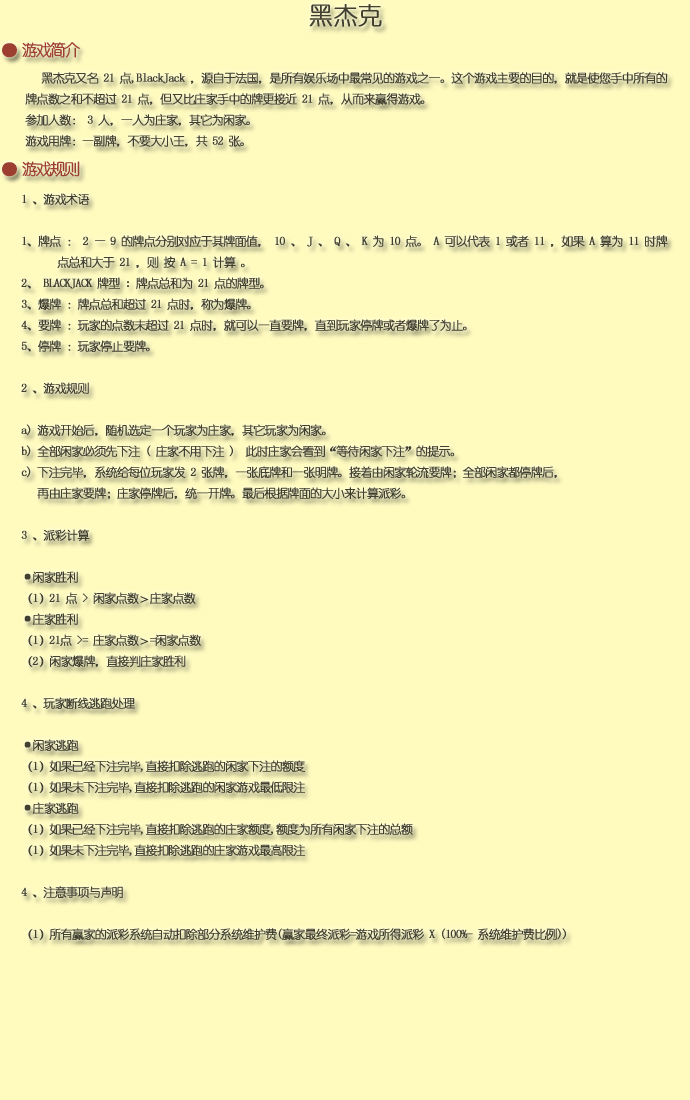
<style>
.page{position:relative;width:690px;height:1100px;background:#fffbbf}
.page>*{position:absolute;margin:0}
.t1{font:24px "YouYuan";color:#403f30;font-weight:bold}
.t2{font:16px "YouYuan";letter-spacing:-0.14em;color:#9c3f30;font-weight:bold}
.t3{font:12px "YouYuan";letter-spacing:-0.08em;color:#403f30;font-weight:bold}
</style>
<div class="page">
<p class="t1" style="left:309px;top:4px;width:73px;height:23px">黑杰克</p>
<p class="t2" style="left:2px;top:42px;width:78px;height:16px">● 游戏简介</p>
<p class="t3" style="left:25px;top:72px;width:643px;height:75px">黑杰克又名 21 点,BlackJack ，源自于法国，是所有娱乐场中最常见的游戏之一。这个游戏主要的目的，就是使您手中所有的<br>牌点数之和不超过 21 点，但又比庄家手中的牌更接近 21 点，从而来赢得游戏。<br>参加人数： 3 人，一人为庄家，其它为闲家。<br>游戏用牌：一副牌，不要大小王，共 52 张。</p>
<p class="t2" style="left:2px;top:161px;width:78px;height:16px">● 游戏规则</p>
<p class="t3" style="left:21px;top:193px;width:647px;height:747px">1 、游戏术语<br><br>1、牌点 ： 2 — 9 的牌点分别对应于其牌面值， 10 、 J 、 Q 、 K 为 10 点。 A 可以代表 1 或者 11 ，如果 A 算为 11 时牌<br> 点总和大于 21 ，则 按 A = 1 计算 。<br>2、 BLACKJACK 牌型 : 牌点总和为 21 点的牌型。<br>3、爆牌 ：牌点总和超过 21 点时，称为爆牌。<br>4、要牌 ：玩家的点数未超过 21 点时，就可以一直要牌，直到玩家停牌或者爆牌了为止。<br>5、停牌 ：玩家停止要牌。<br> <br>2 、游戏规则 <br><br>a) 游戏开始后，随机选定一个玩家为庄家，其它玩家为闲家。<br>b) 全部闲家必须先下注 ( 庄家不用下注 )  此时庄家会看到“等待闲家下注”的提示。<br>c) 下注完毕，系统给每位玩家发 2 张牌，一张底牌和一张明牌。接着由闲家轮流要牌；全部闲家都停牌后，<br>   再由庄家要牌；庄家停牌后，统一开牌。最后根据牌面的大小来计算派彩。 <br><br>3 、派彩计算 <br><br>·闲家胜利<br>（1）21 点 &gt; 闲家点数＞庄家点数<br>·庄家胜利 <br>（1）21点 &gt;= 庄家点数＞=闲家点数 <br>（2）闲家爆牌，直接判庄家胜利<br><br>4 、玩家断线逃跑处理<br><br>·闲家逃跑<br>（1）如果已经下注完毕,直接扣除逃跑的闲家下注的额度<br>（1）如果未下注完毕,直接扣除逃跑的闲家游戏最低限注<br>·庄家逃跑<br>（1）如果已经下注完毕,直接扣除逃跑的庄家额度,额度为所有闲家下注的总额<br>（1）如果未下注完毕,直接扣除逃跑的庄家游戏最高限注<br><br>4 、注意事项与声明<br><br>（1）所有赢家的派彩系统自动扣除部分系统维护费(赢家最终派彩=游戏所得派彩 X (100%- 系统维护费比例))</p>
</div>
